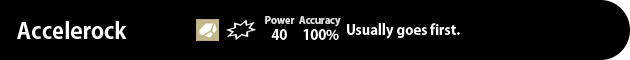
<style>
.page{position:relative;width:630px;height:60px;background:#000000}
.page>*{position:absolute;margin:0}
.t1{font:10px "AdobeGothicStd-Bold";color:#dedede}
.t2{font:22px "AdobeGothicStd-Bold";color:#ffffff}
.t3{font:14px "AdobeGothicStd-Bold";color:#ffffff}
</style>
<div class="page">
<p class="t1" style="left:265px;top:16px;width:30px;height:8px">Power</p>
<p class="t1" style="left:299px;top:16px;width:42px;height:11px">Accuracy</p>
<p class="t2" style="left:17px;top:21px;width:110px;height:18px">Accelerock</p>
<p class="t3" style="left:271px;top:29px;width:16px;height:11px">40</p>
<p class="t3" style="left:303px;top:29px;width:36px;height:11px">100%</p>
<p class="t3" style="left:347px;top:23px;width:113px;height:16px">Usually goes first.</p>
</div>
